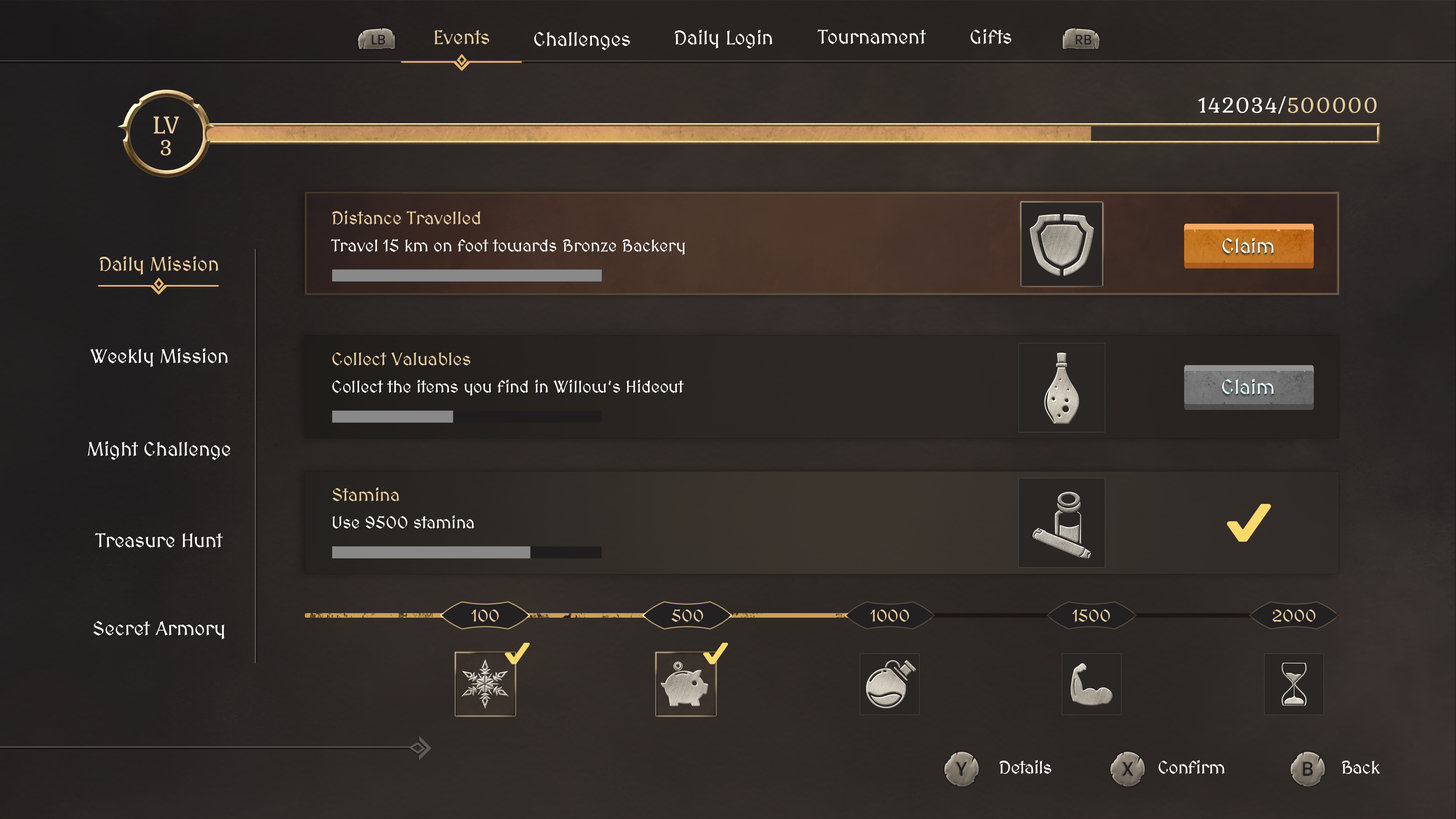
<style>
.page{position:relative;width:1456px;height:819px}
.page>*{position:absolute;margin:0}
.t1{font:19.8px "MedievalSharp";color:#ebcd9e}
.t2{font:19.8px "MedievalSharp";color:#ffffff}
.t3{font:22.7px "Kurale-Regular";color:#ffffff}
.t4{font:22.7px "Kurale-Regular";color:#ebcd9e}
.t5{font:26.1px "Kurale-Regular";color:#ebcd9e}
.t6{font:18.2px "MedievalSharp";color:#ebcd9e}
.t7{font:17.1px "MedievalSharp";color:#ffffff}
.t8{font:20.5px "MedievalSharp";color:#e5fbfd}
.t9{font:17.1px "MedievalSharp";color:#ebcd9e}
.t10{font:18.2px "MedievalSharp";letter-spacing:-0.02em;color:#ffffff}
</style>
<div class="page">
<p class="t1" style="left:435px;top:30px;width:54px;height:14px">Events</p>
<p class="t2" style="left:675px;top:30px;width:97px;height:19px">Daily Login</p>
<p class="t2" style="left:817px;top:30px;width:109px;height:14px">Tournament</p>
<p class="t2" style="left:971px;top:29px;width:40px;height:15px">Gifts</p>
<p class="t2" style="left:534px;top:32px;width:96px;height:18px">Challenges</p>
<p class="t3" style="left:1198px;top:96px;width:179px;height:18px">142034/<span class="t4">500000</span></p>
<p class="t5" style="left:153px;top:116px;width:26px;height:18px">LV</p>
<p class="t4" style="left:161px;top:140px;width:10px;height:15px">3</p>
<p class="t6" style="left:332px;top:210px;width:148px;height:14px">Distance Travelled</p>
<p class="t7" style="left:331px;top:239px;width:354px;height:16px">Travel 15 km on foot towards Bronze Backery</p>
<p class="t8" style="left:1222px;top:238px;width:52px;height:15px">Claim</p>
<p class="t1" style="left:99px;top:256px;width:119px;height:19px">Daily Mission</p>
<p class="t2" style="left:90px;top:348px;width:138px;height:19px">Weekly Mission</p>
<p class="t6" style="left:332px;top:352px;width:139px;height:14px">Collect Valuables</p>
<p class="t7" style="left:332px;top:380px;width:352px;height:16px">Collect the items you find in Willow’s Hideout</p>
<p class="t8" style="left:1222px;top:379px;width:52px;height:15px">Claim</p>
<p class="t2" style="left:88px;top:441px;width:142px;height:19px">Might Challenge</p>
<p class="t6" style="left:332px;top:487px;width:67px;height:14px">Stamina</p>
<p class="t7" style="left:333px;top:515px;width:141px;height:14px">Use 9500 stamina</p>
<p class="t2" style="left:95px;top:533px;width:128px;height:15px">Treasure Hunt</p>
<p class="t9" style="left:471px;top:609px;width:28px;height:13px">100</p>
<p class="t9" style="left:671px;top:609px;width:32px;height:13px">500</p>
<p class="t9" style="left:870px;top:609px;width:39px;height:13px">1000</p>
<p class="t9" style="left:1072px;top:609px;width:38px;height:13px">1500</p>
<p class="t9" style="left:1272px;top:609px;width:44px;height:13px">2000</p>
<p class="t2" style="left:93px;top:621px;width:131px;height:18px">Secret Armory</p>
<p class="t10" style="left:999px;top:760px;width:52px;height:14px">Details</p>
<p class="t10" style="left:1158px;top:760px;width:67px;height:14px">Confirm</p>
<p class="t10" style="left:1342px;top:761px;width:38px;height:13px">Back</p>
</div>
